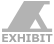
<style>
.page{position:relative;width:54px;height:44px;background:#ffffff}
.page>*{position:absolute;margin:0}
.t1{font:11px "Verdana-Bold";letter-spacing:-0.025em;color:#a7a7a7}
</style>
<div class="page">
<p class="t1" style="left:2px;top:34px;width:51px;height:8px">EXHIBIT</p>
</div>
